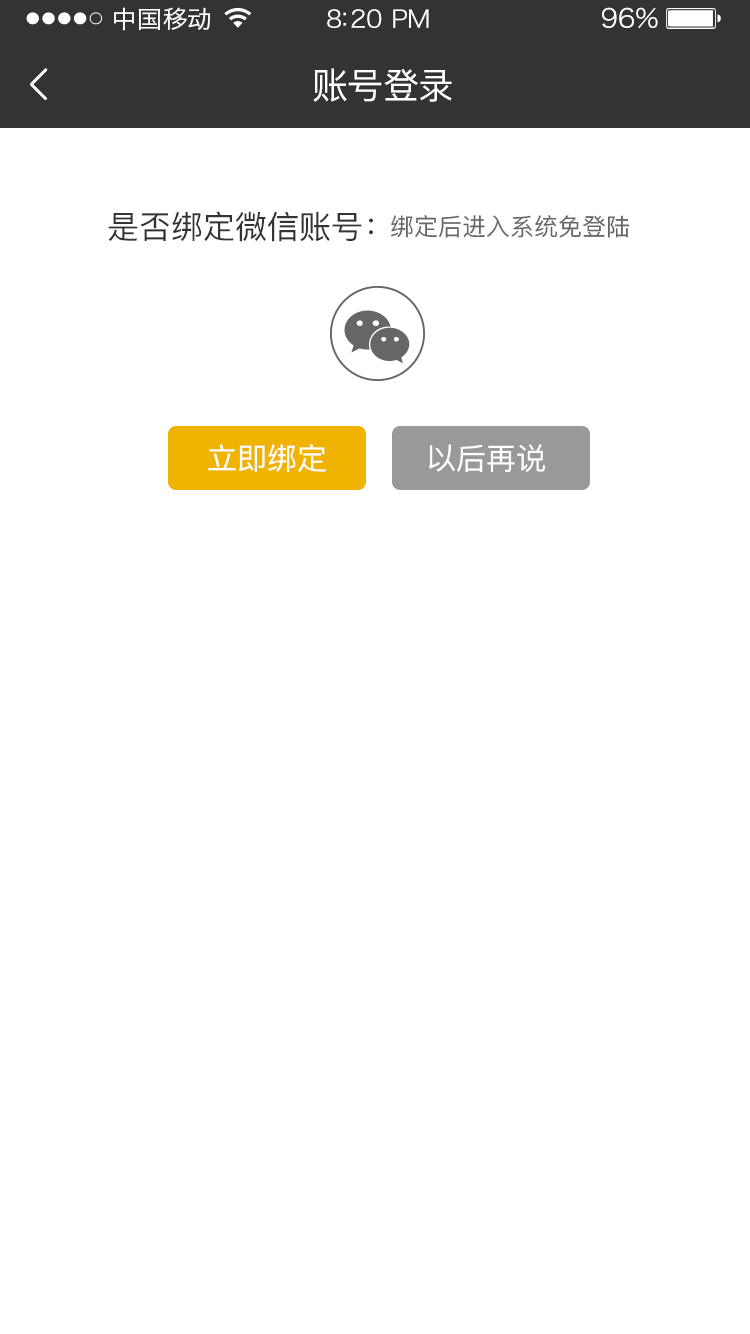
<style>
.page{position:relative;width:750px;height:1334px;background:#ffffff}
.page>*{position:absolute;margin:0}
.t1{font:24px "HiraginoSansGB-W3";letter-spacing:0.02em;color:#ffffff;scale:1.03 1}
.t2{font:24px "HiraginoSansGB-W3";letter-spacing:-0.02em;color:#ffffff;scale:1.03 1}
.t3{font:26.2px "HiraginoSansGB-W3";letter-spacing:-0.02em;color:#ffffff;scale:1.03 1}
.t4{font:36px "PingFangSC-Regular";letter-spacing:-0.02em;color:#ffffff}
.t5{font:32px "PingFangSC-Regular";color:#333333}
.t6{font:24px "PingFangSC-Regular";color:#666666}
.t7{font:30px "PingFangSC-Regular";color:#ffffff}
</style>
<div class="page">
<p class="t1" style="left:114px;top:7px;width:97px;height:24px">中国移动</p>
<p class="t2" style="left:327px;top:9px;width:102px;height:19px">8:20 PM</p>
<p class="t3" style="left:602px;top:7px;width:56px;height:22px">96%</p>
<p class="t4" style="left:313px;top:68px;width:139px;height:34px">账号登录</p>
<p class="t5" style="left:108px;top:211px;width:265px;height:31px">是否绑定微信账号：</p>
<p class="t6" style="left:391px;top:215px;width:238px;height:23px">绑定后进入系统免登陆</p>
<p class="t7" style="left:208px;top:444px;width:118px;height:28px">立即绑定</p>
<p class="t7" style="left:429px;top:444px;width:117px;height:29px">以后再说</p>
</div>
